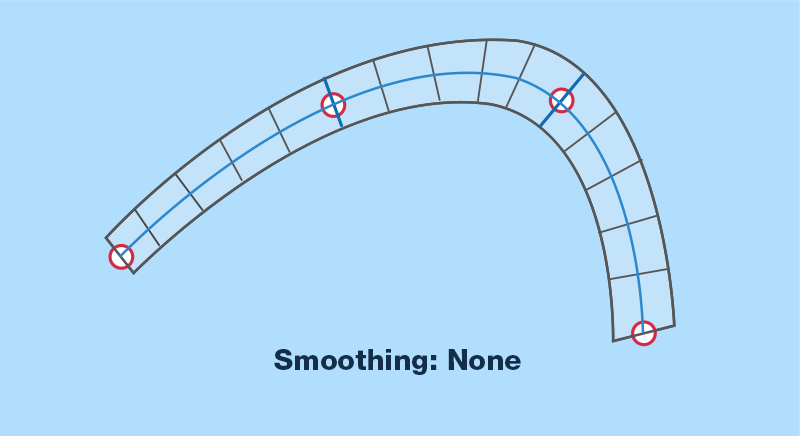
<style>
.page{position:relative;width:800px;height:436px;background:#b1defd}
.page>*{position:absolute;margin:0}
.t1{font:28.8px "HelveticaNeueCyr-Heavy";color:#142d49}
</style>
<div class="page">
<p class="t1" style="left:274px;top:349px;width:247px;height:26px">Smoothing: None</p>
</div>
